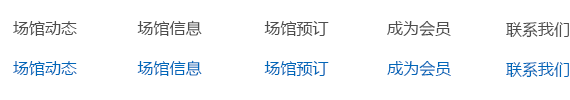
<style>
.page{position:relative;width:570px;height:100px;background:#ffffff}
.page>*{position:absolute;margin:0}
.t1{font:16px "MicrosoftYaHei";color:#4d4d4d}
.t2{font:16px "MicrosoftYaHei";color:#0167b9}
</style>
<div class="page">
<p class="t1" style="left:13px;top:21px;width:64px;height:15px">场馆动态</p>
<p class="t1" style="left:137px;top:20px;width:65px;height:16px">场馆信息</p>
<p class="t1" style="left:264px;top:21px;width:65px;height:15px">场馆预订</p>
<p class="t1" style="left:387px;top:20px;width:64px;height:17px">成为会员</p>
<p class="t1" style="left:506px;top:22px;width:63px;height:16px">联系我们</p>
<p class="t2" style="left:13px;top:61px;width:64px;height:15px">场馆动态</p>
<p class="t2" style="left:137px;top:60px;width:65px;height:16px">场馆信息</p>
<p class="t2" style="left:264px;top:61px;width:65px;height:15px">场馆预订</p>
<p class="t2" style="left:387px;top:60px;width:64px;height:17px">成为会员</p>
<p class="t2" style="left:506px;top:62px;width:63px;height:16px">联系我们</p>
</div>
